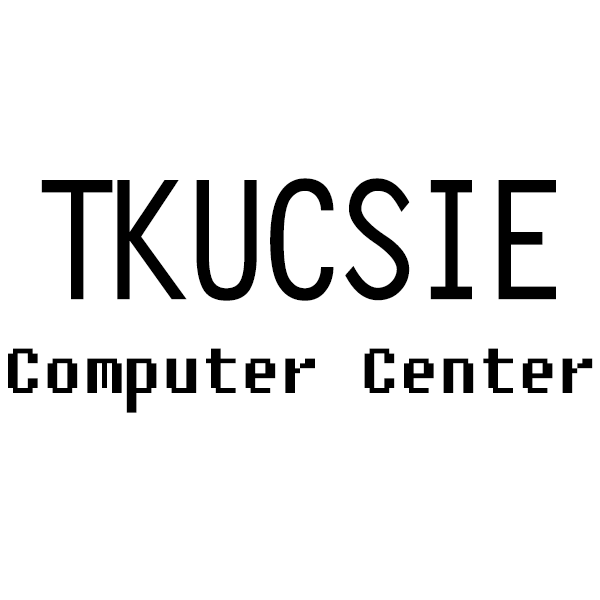
<style>
.page{position:relative;width:600px;height:600px;background:#ffffff}
.page>*{position:absolute;margin:0}
.t1{font:150px "Pop1-Bold";color:#000000}
.t2{font:79.2px "Fixedsys";color:#000000}
</style>
<div class="page">
<p class="t1" style="left:41px;top:178px;width:515px;height:123px">TKUCSIE</p>
<p class="t2" style="left:8px;top:348px;width:585px;height:65px">Computer Center</p>
</div>
